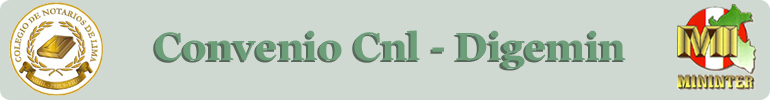
<style>
.page{position:relative;width:770px;height:100px;background:#d0d9d1}
.page>*{position:absolute;margin:0}
.t1{font:38.9px "Georgia-Bold";color:#6b9e79}
.t2{font:38.9px "Georgia-Bold"}
</style>
<div class="page">
<p class="t1" style="left:155px;top:30px;width:471px;height:39px">Convenio Cnl - Digemin</p>
<p class="t2" style="left:153px;top:32px;width:471px;height:39px">Convenio Cnl - Digemin</p>
</div>
